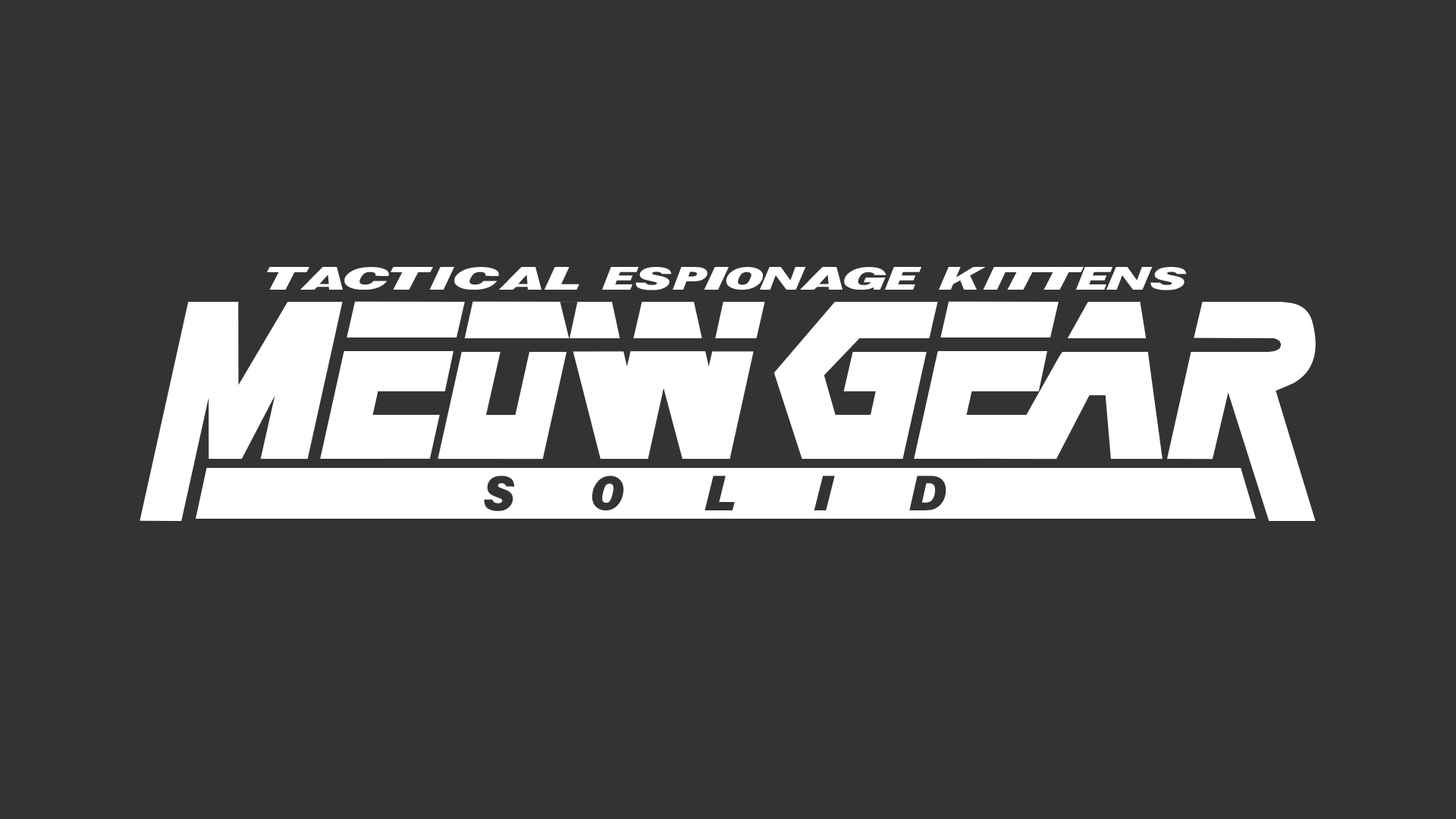
<style>
.page{position:relative;width:1456px;height:819px;background:#333333}
.page>*{position:absolute;margin:0}
.t1{font:44.2px "Tactical-Espionage-Action";letter-spacing:0.025em;color:#ffffff}
.t2{font:44.2px "Tactical-Espionage-Action";color:#ffffff}
.t3{font:173.8px "MetalGear";color:#ffffff}
</style>
<div class="page">
<p class="t1" style="left:267px;top:267px;width:920px;height:23px"><span class="t2">T</span>actical Espionage Kittens</p>
<p class="t3" style="left:140px;top:301px;width:1176px;height:220px">Meow geaR</p>
</div>
